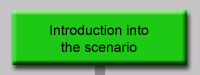
<style>
.page{position:relative;width:200px;height:75px;background:#1ec915}
.page>*{position:absolute;margin:0}
.t1{font:14px "ArialMT";color:#000000}
</style>
<div class="page">
<p class="t1" style="left:50px;top:25px;width:99px;height:27px;text-align:center">Introduction into<br>the scenario</p>
</div>
